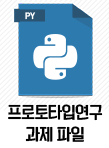
<style>
.page{position:relative;width:109px;height:148px;background:#ffffff}
.page>*{position:absolute;margin:0}
.t1{font:15.6px/22.6px "KoreanYNSJG4-R";letter-spacing:-0.035em;color:#000000;scale:0.95 1}
</style>
<div class="page">
<p class="t1" style="left:8px;top:104px;width:95px;height:38px;text-align:center">프로토타입연구<br>과제 파일</p>
</div>
